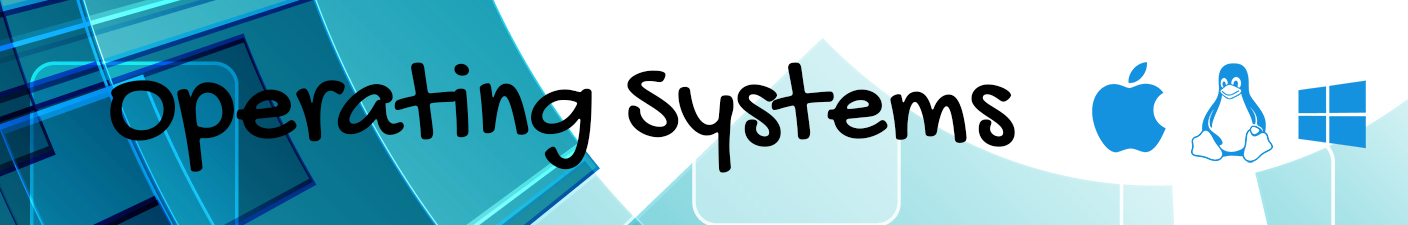
<style>
.page{position:relative;width:1408px;height:225px;background:#ffffff}
.page>*{position:absolute;margin:0}
.t1{font:116.7px "GochiHand-Regular";color:#000000}
</style>
<div class="page">
<p class="t1" style="left:110px;top:62px;width:905px;height:111px">Operating Systems</p>
</div>
